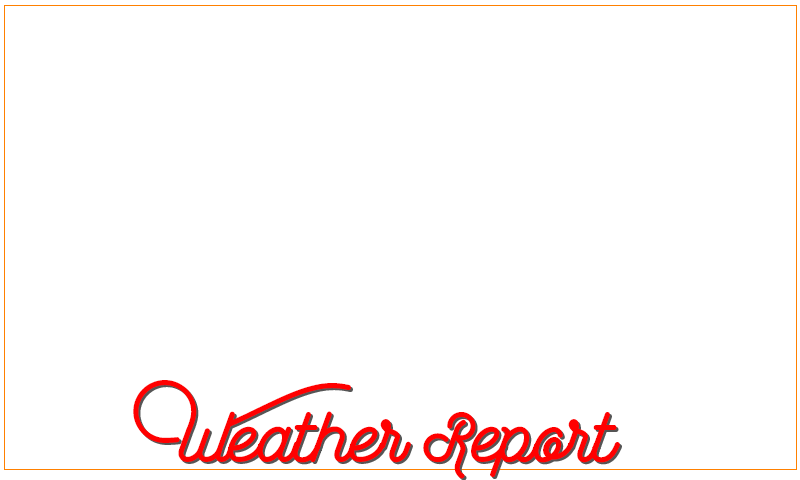
<style>
.page{position:relative;width:800px;height:480px;background:#ffffff}
.page>*{position:absolute;margin:0}
.t1{font:72px "Wasted-Regular";color:#ff0000}
</style>
<div class="page">
<p class="t1" style="left:133px;top:380px;width:487px;height:99px">Weather Report</p>
</div>
